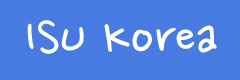
<style>
.page{position:relative;width:240px;height:80px;background:#487be1}
.page>*{position:absolute;margin:0}
.t1{font:60px "NanumPenOTF";color:#ffffff}
</style>
<div class="page">
<p class="t1" style="left:27px;top:20px;width:190px;height:34px">ISU Korea</p>
</div>
